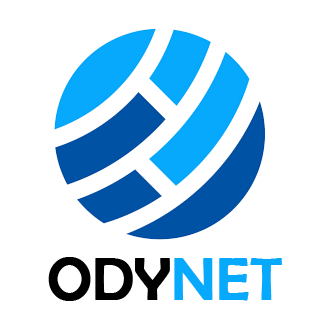
<style>
.page{position:relative;width:329px;height:328px;background:#ffffff}
.page>*{position:absolute;margin:0}
.t1{font:60px "BerlinSansFB-Reg";color:#000000;font-weight:bold}
.t2{font:60px "BerlinSansFB-Reg";color:#07a9fc;font-weight:bold}
</style>
<div class="page">
<p class="t1" style="left:48px;top:257px;width:234px;height:44px">ODY<span class="t2">NET</span></p>
</div>
